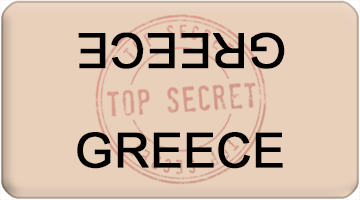
<style>
.page{position:relative;width:360px;height:200px;background:#e8d0bb}
.page>*{position:absolute;margin:0}
.t1{font:48px "ArialMT";color:#000000;font-weight:bold}
</style>
<div class="page">
<p class="t1" style="left:78px;top:32px;width:207px;height:37px;rotate:180deg">GREECE</p>
<p class="t1" style="left:77px;top:132px;width:206px;height:37px">GREECE</p>
</div>
